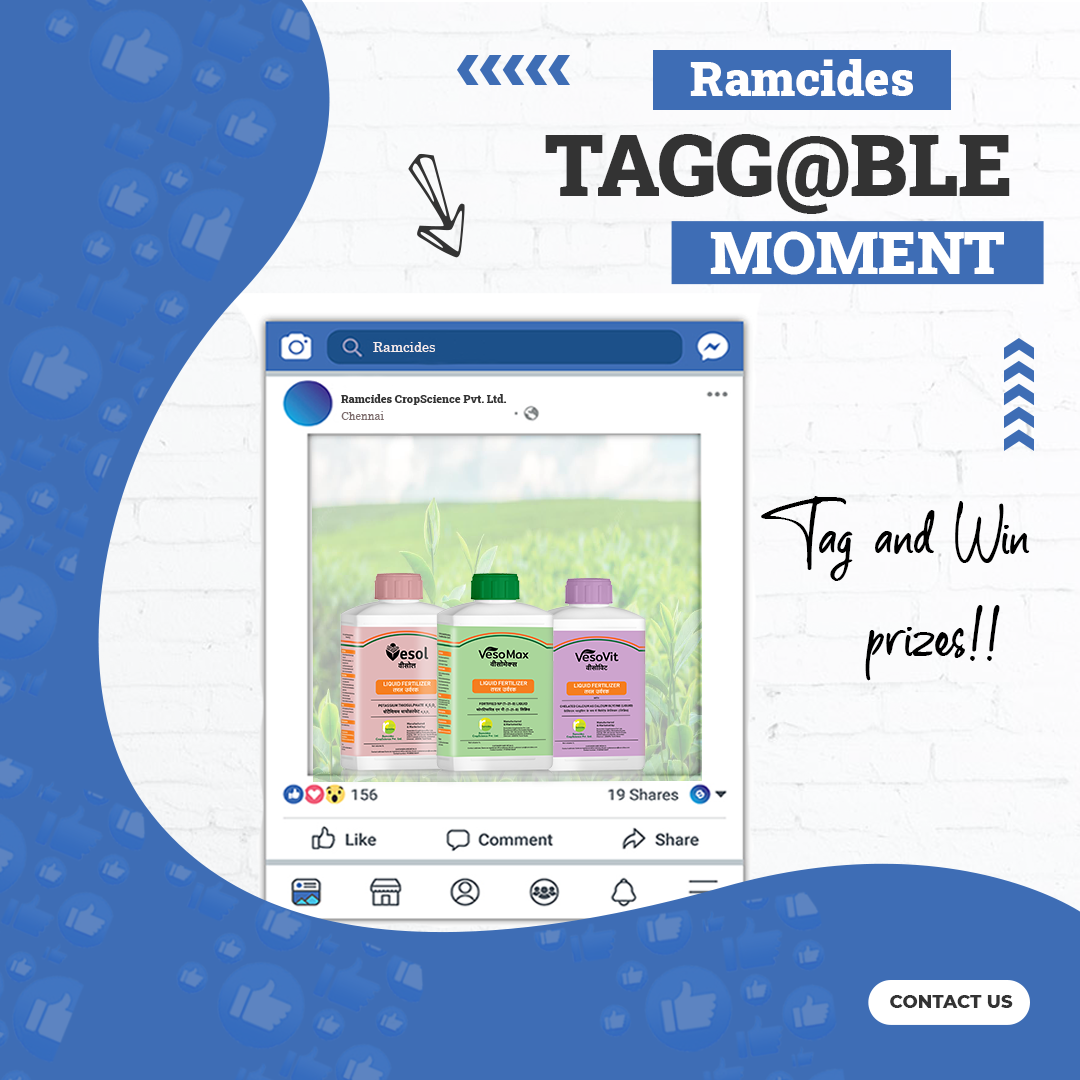
<style>
.page{position:relative;width:1080px;height:1080px;background:#3e6db5}
.page>*{position:absolute;margin:0}
.t1{font:48px "RobotoSlab-Black";color:#fffefe}
.t2{font:86.4px "RobotoSlab-Black";color:#333333;text-transform:uppercase}
.t3{font:59.9px "RobotoSlab-Black";color:#ffffff;text-transform:uppercase}
.t4{font:14px "Century";color:#f7eeee}
.t5{font:11px "RobotoSlab-Black";color:#333333}
.t6{font:11px "Century";color:#7d6c6c}
.t7{font:85.1px "TheRambler";color:#000000}
.t8{font:18px "Montserrat-ExtraBold";color:#333333;text-transform:uppercase}
</style>
<div class="page">
<p class="t1" style="left:690px;top:59px;width:223px;height:37px">Ramcides</p>
<p class="t2" style="left:545px;top:134px;width:465px;height:80px">Tagg@ble</p>
<p class="t3" style="left:710px;top:231px;width:294px;height:44px">Moment</p>
<p class="t4" style="left:373px;top:342px;width:62px;height:10px">Ramcides</p>
<p class="t5" style="left:341px;top:394px;width:166px;height:11px">Ramcides CropScience Pvt. Ltd.</p>
<p class="t6" style="left:341px;top:411px;width:43px;height:9px">Chennai</p>
<p class="t7" style="left:761px;top:496px;width:269px;height:185px">Tag and Win <br>     prizes!!</p>
<p class="t8" style="left:890px;top:995px;width:123px;height:13px">Contact Us</p>
</div>
